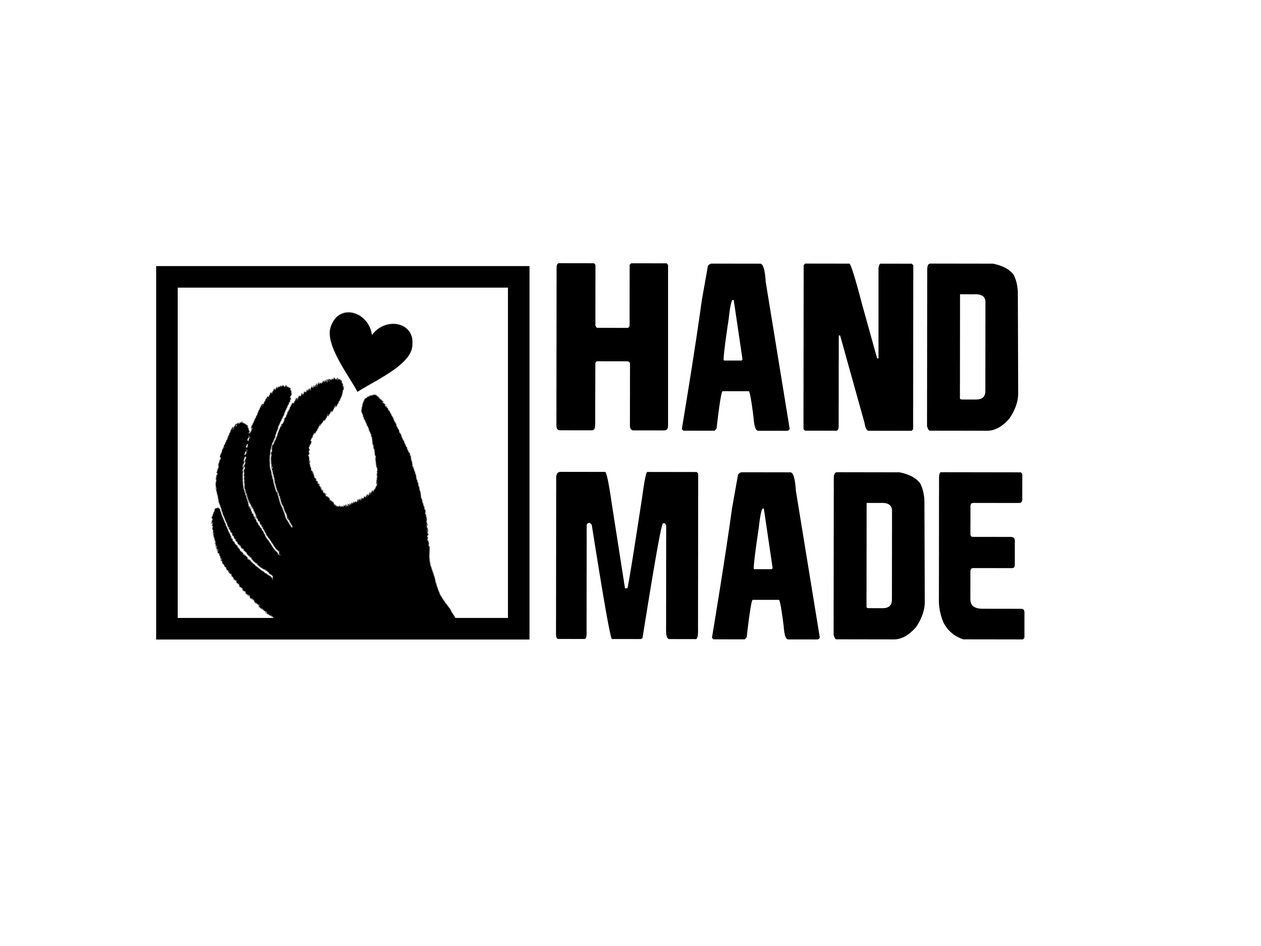
<style>
.page{position:relative;width:1261px;height:946px;background:#ffffff}
.page>*{position:absolute;margin:0}
.t1{font:228px "EASPORTS";color:#000000;scale:0.83 1}
</style>
<div class="page">
<p class="t1" style="left:556px;top:263px;width:462px;height:168px">HAND</p>
<p class="t1" style="left:556px;top:472px;width:469px;height:167px">MADE</p>
</div>
